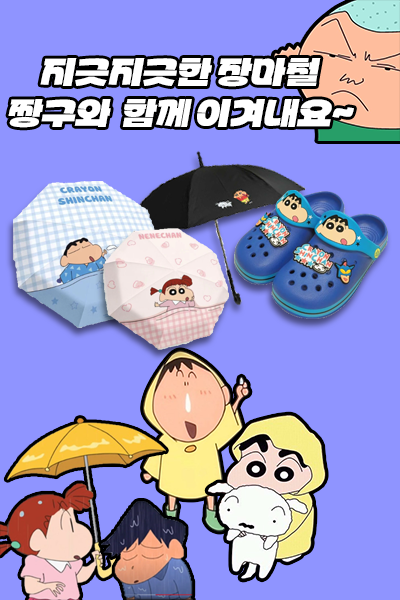
<style>
.page{position:relative;width:400px;height:600px;background:#8f94ff}
.page>*{position:absolute;margin:0}
.t1{font:30px/41px "Partial-Sans-KR";color:#ffffff;font-style:italic}
</style>
<div class="page">
<p class="t1" style="left:8px;top:58px;width:346px;height:70px;text-align:center">지긋지긋한 장마철<br>짱구와  함께 이겨내요~</p>
</div>
